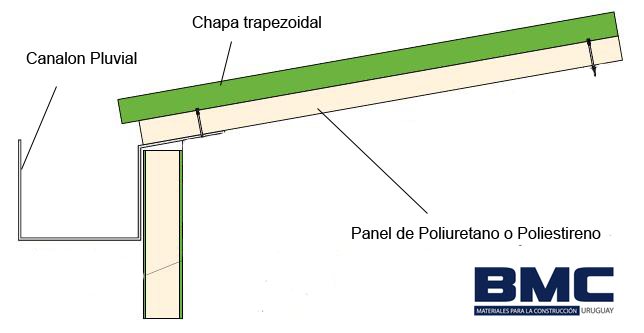
<style>
.page{position:relative;width:644px;height:333px;background:#ffffff}
.page>*{position:absolute;margin:0}
.t1{font:16px "ArialMT";color:#000000}
</style>
<div class="page">
<p class="t1" style="left:192px;top:16px;width:129px;height:15px">Chapa trapezoidal</p>
<p class="t1" style="left:26px;top:52px;width:111px;height:12px">Canalon Pluvial</p>
<p class="t1" style="left:352px;top:227px;width:249px;height:12px">Panel de Poliuretano o Poliestireno</p>
</div>
